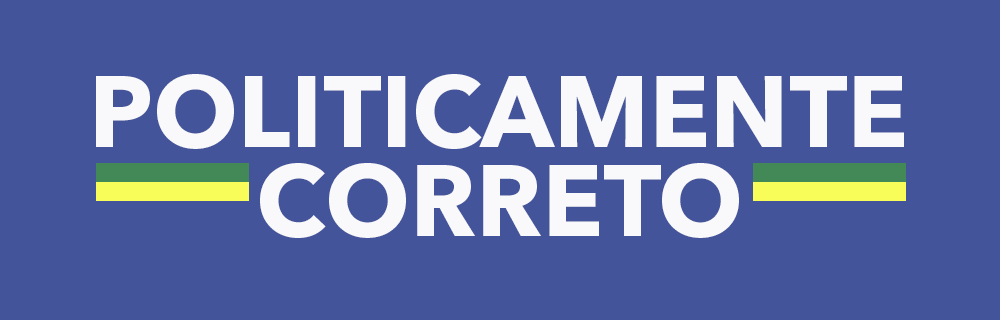
<style>
.page{position:relative;width:1000px;height:320px;background:#43549a}
.page>*{position:absolute;margin:0}
.t1{font:100px "AvenirNextLTPro-Bold";color:#f9f9fb}
</style>
<div class="page">
<p class="t1" style="left:96px;top:74px;width:808px;height:75px">POLITICAMENTE</p>
<p class="t1" style="left:260px;top:163px;width:479px;height:75px">CORRETO</p>
</div>
